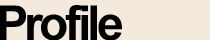
<style>
.page{position:relative;width:210px;height:40px;background:#f3e9dc}
.page>*{position:absolute;margin:0}
.t1{font:48px "Arial-BoldMT";letter-spacing:-0.075em;color:#000000}
</style>
<div class="page">
<p class="t1" style="left:0px;top:5px;width:122px;height:36px">Profile</p>
</div>
